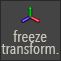
<style>
.page{position:relative;width:61px;height:61px;background:#444444}
.page>*{position:absolute;margin:0}
.t1{font:16px/12px "AvenirNextCondensed-Regular";color:#c9c7ba}
</style>
<div class="page">
<p class="t1" style="left:1px;top:30px;width:58px;height:24px;text-align:center">freeze<br>transform.</p>
</div>
